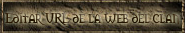
<style>
.page{position:relative;width:185px;height:33px}
.page>*{position:absolute;margin:0}
.t1{font:13.7px "Morpheus"}
</style>
<div class="page">
<p class="t1" style="left:5px;top:13px;width:175px;height:12px">Editar URL de la web del clan</p>
</div>
